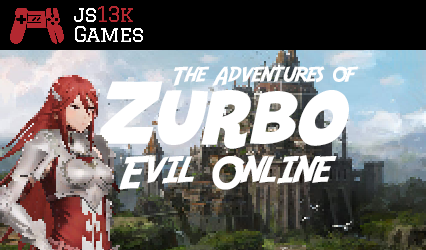
<style>
.page{position:relative;width:426px;height:250px}
.page>*{position:absolute;margin:0}
.t1{font:25.4px "Adventure";color:#ffffff}
.t2{font:50px "HeroesLegend";color:#ffffff}
.t3{font:45px "Adventure";color:#ffffff}
</style>
<div class="page">
<p class="t1" style="left:173px;top:66px;width:186px;height:20px">The Adventures of</p>
<p class="t2" style="left:98px;top:81px;width:251px;height:68px">Zurbo</p>
<p class="t3" style="left:119px;top:155px;width:218px;height:35px">Evil Online</p>
</div>
